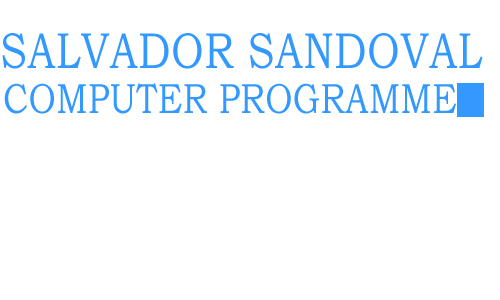
<style>
.page{position:relative;width:500px;height:300px;background:#ffffff}
.page>*{position:absolute;margin:0}
.t1{font:50.6px "BookmanOldStyle";letter-spacing:0.01em;color:#3399ff;text-transform:uppercase;scale:0.81 1}
.t2{font:42.2px "BookmanOldStyle";letter-spacing:0.01em;color:#3399ff;text-transform:uppercase;scale:0.81 1}
</style>
<div class="page">
<p class="t1" style="left:2px;top:33px;width:481px;height:36px">salvador sandoval</p>
<p class="t2" style="left:4px;top:83px;width:478px;height:31px">computer programmer</p>
</div>
